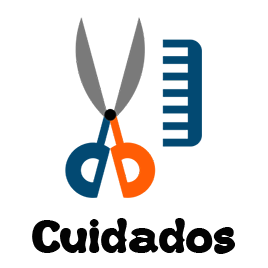
<style>
.page{position:relative;width:268px;height:268px;background:#ffffff}
.page>*{position:absolute;margin:0}
.t1{font:41.7px "Kush-Fat";color:#030303}
</style>
<div class="page">
<p class="t1" style="left:32px;top:218px;width:203px;height:36px">Cuidados</p>
</div>
